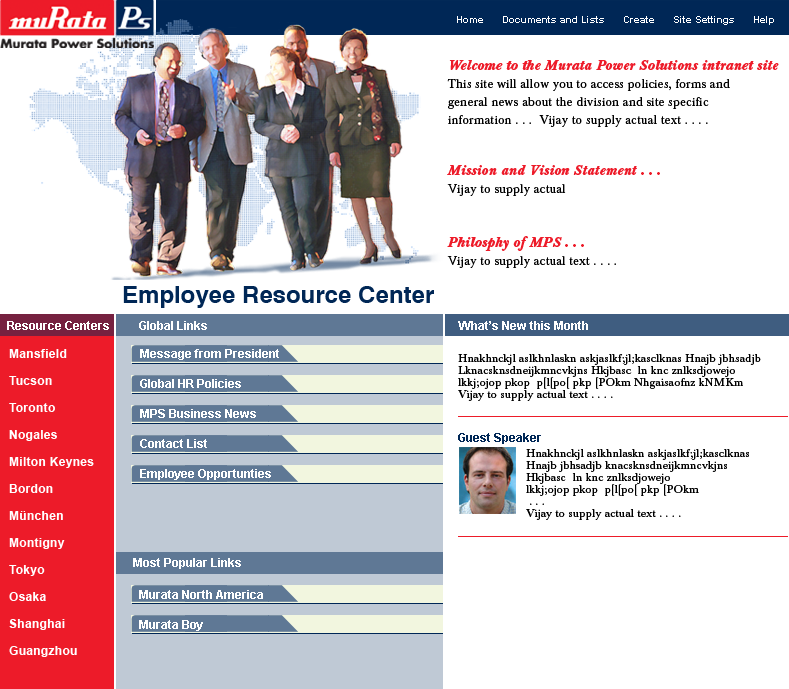
<style>
.page{position:relative;width:789px;height:689px;background:#ffffff}
.page>*{position:absolute;margin:0}
.t1{font:10px "Arial-BoldMT";color:#ffffff}
.t2{font:12px/18px "BaskervilleBE-Regular";letter-spacing:0.025em;color:#000000}
.t3{font:14px/18px "BaskervilleBE-MediumItalic";letter-spacing:0.025em;color:#ed1b29}
.t4{font:13px/18px "BaskervilleBE-Regular";letter-spacing:0.025em;color:#000000}
.t5{font:24px "Helvetica-Bold";color:#002756}
.t6{font:12px "Arial-BoldMT";color:#ffffff}
.t7{font:12px/27px "Arial-BoldMT";letter-spacing:0.025em;color:#ffffff}
.t8{font:12px/30px "Arial-BoldMT";color:#ffffff}
.t9{font:11px/12px "BaskervilleBE-Regular";letter-spacing:0.025em;color:#000000}
.t10{font:12px "Arial-BoldMT";color:#002756}
</style>
<div class="page">
<p class="t1" style="left:457px;top:16px;width:317px;height:9px">Home      Documents and Lists      Create      Site Settings      Help</p>
<p class="t2" style="left:447px;top:60px;width:332px;height:67px"><span class="t3">Welcome to the Murata Power Solutions intranet site  <br></span>This site will allow you to access policies, forms and <br>general news about the division and site specific <br>information . . .  Vijay to supply actual text . . . .</p>
<p class="t2" style="left:447px;top:165px;width:213px;height:103px"><span class="t4"><br></span><span class="t3">Mission and Vision Statement . . . <br></span>Vijay to supply actual<br><br><br><span class="t3">Philosphy of MPS . . .<br></span>Vijay to supply actual text . . . .</p>
<p class="t5" style="left:123px;top:286px;width:311px;height:22px">Employee Resource Center</p>
<p class="t6" style="left:7px;top:321px;width:102px;height:9px">Resource Centers</p>
<p class="t6" style="left:139px;top:321px;width:68px;height:9px">Global Links</p>
<p class="t6" style="left:458px;top:321px;width:130px;height:9px">What’s New this Month</p>
<p class="t7" style="left:9px;top:349px;width:85px;height:308px">Mansfield<br>Tucson<br>Toronto<br>Nogales<br>Milton Keynes<br>Bordon<br>München<br>Montigny<br>Tokyo<br>Osaka<br>Shanghai<br>Guangzhou</p>
<p class="t8" style="left:140px;top:349px;width:139px;height:131px">Message from President<br>Global HR Policies<br>MPS Business News<br>Contact List<br>Employee Opportunties</p>
<p class="t9" style="left:458px;top:354px;width:303px;height:47px">Hnakhnckjl aslkhnlaskn askjaslkf;jl;kasclknas Hnajb jbhsadjb<br>Lknacsknsdneijkmncvkjns Hkjbasc  ln knc znlksdjowejo <br>lkkj;ojop pkop  p[l[po[ pkp [POkm Nhgaisaofnz kNMKm <br>Vijay to supply actual text . . . .</p>
<p class="t10" style="left:458px;top:433px;width:83px;height:11px">Guest Speaker</p>
<p class="t9" style="left:526px;top:449px;width:223px;height:71px">Hnakhnckjl aslkhnlaskn askjaslkf;jl;kasclknas<br>Hnajb jbhsadjb knacsknsdneijkmncvkjns<br>Hkjbasc  ln knc znlksdjowejo <br>lkkj;ojop pkop  p[l[po[ pkp [POkm<br> . . . <br>Vijay to supply actual text . . . .</p>
<p class="t6" style="left:133px;top:558px;width:108px;height:11px">Most Popular Links</p>
<p class="t8" style="left:139px;top:590px;width:124px;height:41px">Murata North America<br>Murata Boy</p>
</div>
